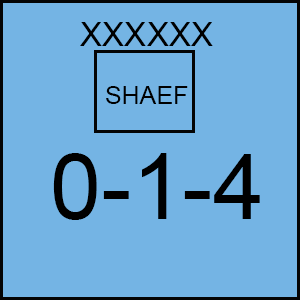
<style>
.page{position:relative;width:300px;height:300px;background:#74b4e4}
.page>*{position:absolute;margin:0}
.t1{font:33.3px "ArialMT";color:#000000}
.t2{font:25px "ArialMT";color:#000000}
.t3{font:91.7px "ArialMT";color:#000000}
</style>
<div class="page">
<p class="t1" style="left:80px;top:22px;width:133px;height:24px">XXXXXX</p>
<p class="t2" style="left:106px;top:86px;width:82px;height:18px">SHAEF</p>
<p class="t3" style="left:53px;top:153px;width:207px;height:67px">0-1-4</p>
</div>
